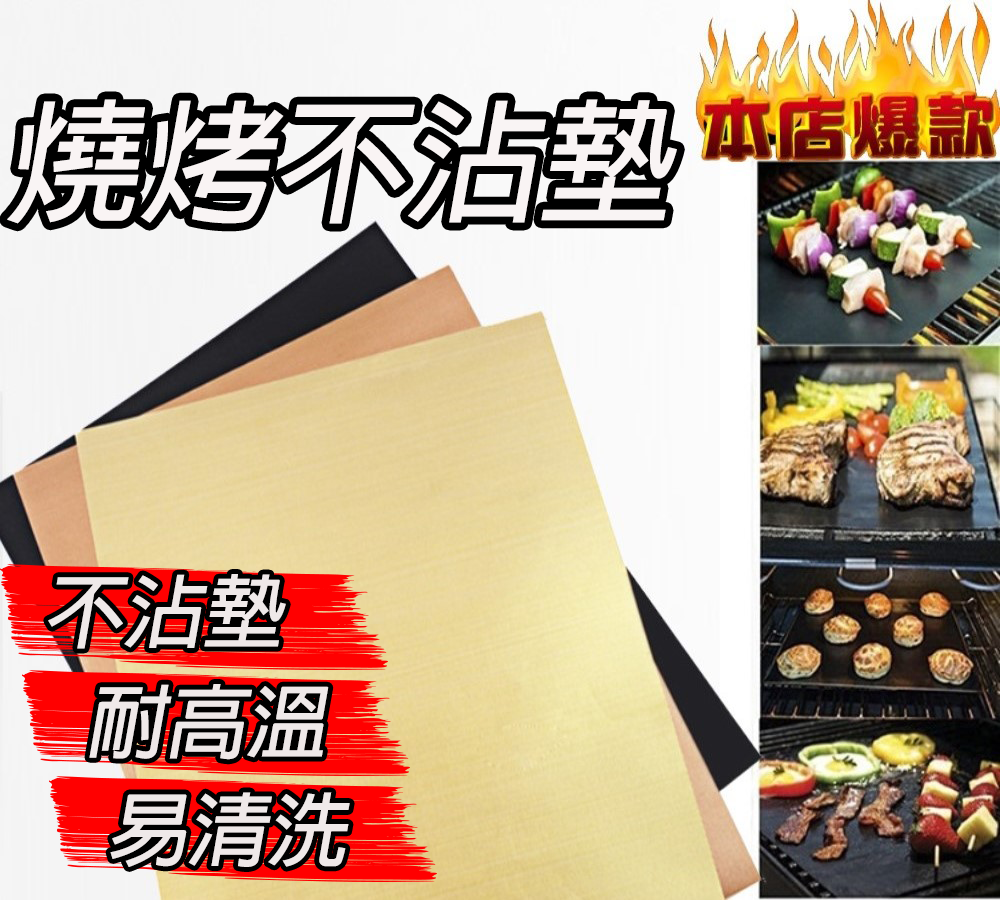
<style>
.page{position:relative;width:1000px;height:900px}
.page>*{position:absolute;margin:0}
.t1{font:133.3px "AdobeFanHeitiStd-Bold";color:#f9f4f4;font-style:italic}
.t2{font:80px "AdobeFanHeitiStd-Bold";color:#efe9e9;font-style:italic}
</style>
<div class="page">
<p class="t1" style="left:7px;top:99px;width:670px;height:125px">燒烤不沾墊</p>
<p class="t2" style="left:48px;top:574px;width:238px;height:75px">不沾墊</p>
<p class="t2" style="left:89px;top:684px;width:240px;height:76px">耐高溫</p>
<p class="t2" style="left:110px;top:792px;width:240px;height:75px">易清洗</p>
</div>
